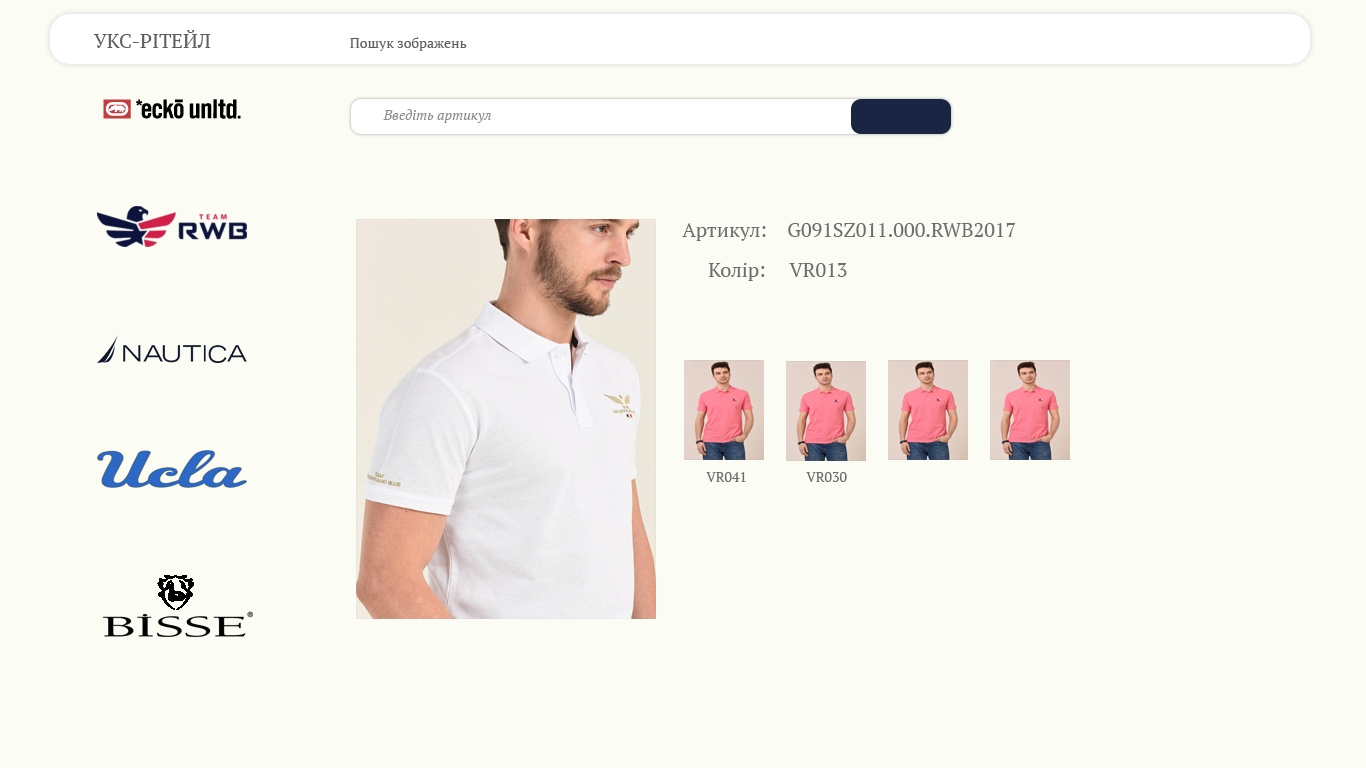
<style>
.page{position:relative;width:1366px;height:768px;background:#fbfdf5}
.page>*{position:absolute;margin:0}
.t1{font:20px "PTSerif-Regular";color:#5e5e5d}
.t2{font:14px "PTSerif-Regular";color:#5e5e5d}
.t3{font:14px "PTSerif-Italic";color:#90908f}
.t4{font:20px "PTSerif-Regular";color:#6d6d6d}
.t5{font:14px "PTSerif-Regular";color:#6d6d6d}
</style>
<div class="page">
<p class="t1" style="left:93px;top:30px;width:118px;height:18px">УКС-РІТЕЙЛ</p>
<p class="t2" style="left:350px;top:37px;width:117px;height:14px">Пошук зображень</p>
<p class="t3" style="left:383px;top:109px;width:108px;height:14px">Введіть артикул</p>
<p class="t4" style="left:682px;top:223px;width:84px;height:18px">Артикул:</p>
<p class="t4" style="left:788px;top:223px;width:228px;height:14px">G091SZ011.000.RWB2017</p>
<p class="t4" style="left:708px;top:263px;width:57px;height:18px">Колір:</p>
<p class="t4" style="left:789px;top:263px;width:58px;height:14px">VR013</p>
<p class="t5" style="left:706px;top:472px;width:40px;height:10px">VR041</p>
<p class="t5" style="left:806px;top:472px;width:41px;height:10px">VR030</p>
</div>
